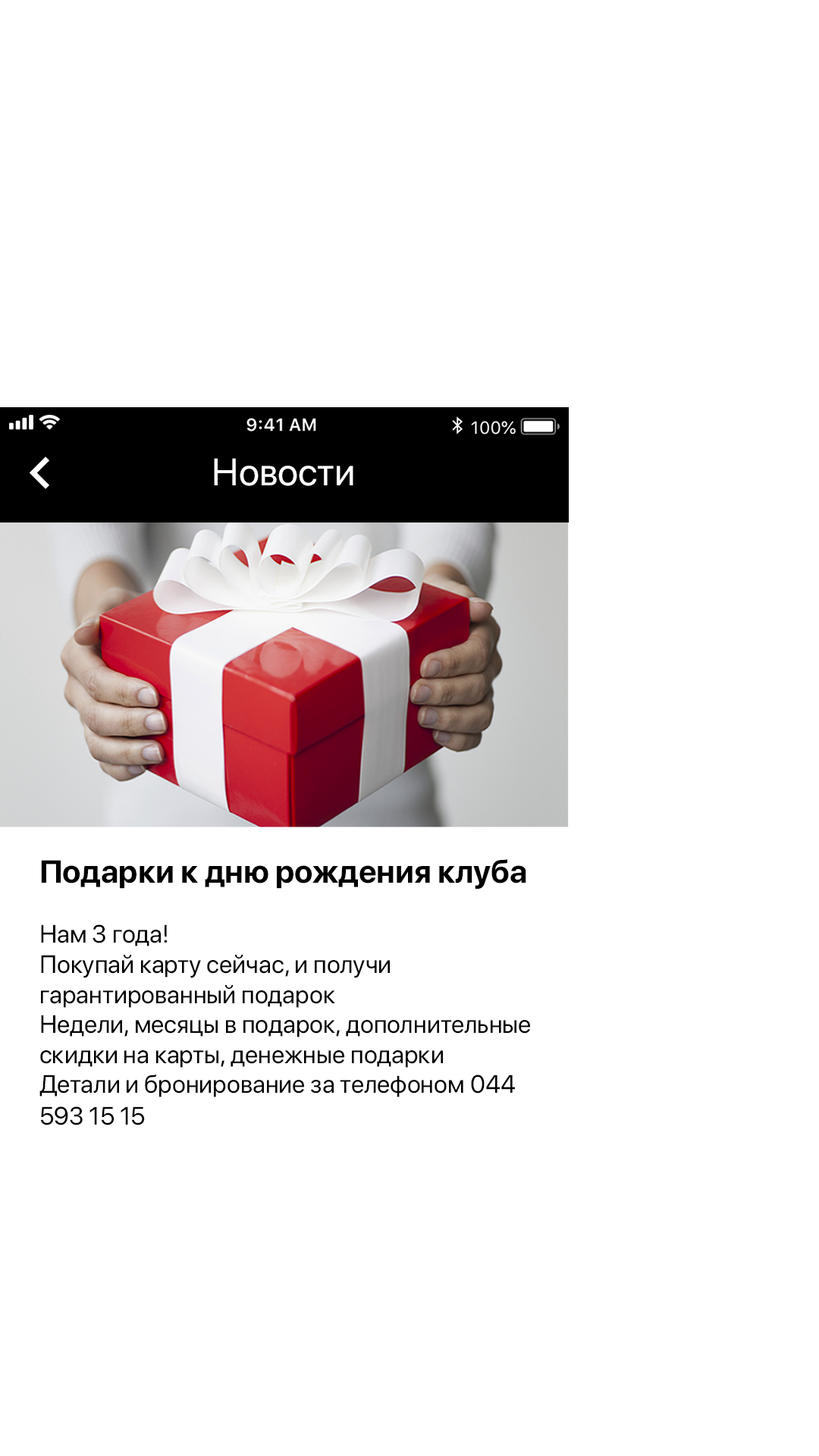
<style>
.page{position:relative;width:819px;height:1456px;background:#ffffff}
.page>*{position:absolute;margin:0}
.t1{font:37.9px "SFProDisplay-Regular";color:#ffffff}
.t2{font:25px "SFProDisplay-Regular";color:#000000}
.t3{font:31.8px/31.4px "SFProDisplay-Bold";color:#000000}
</style>
<div class="page">
<p class="t1" style="left:214px;top:458px;width:139px;height:28px">Новости</p>
<p class="t2" style="left:39px;top:859px;width:491px;height:266px"><span class="t3">Подарки к дню рождения клуба<br><br></span>Нам 3 года!<br>Покупай карту сейчас, и получи гарантированный подарок<br>Недели, месяцы в подарок, дополнительные скидки на карты, денежные подарки<br>Детали и бронирование за телефоном 044 593 15 15</p>
</div>
